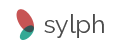
<style>
.page{position:relative;width:125px;height:50px;background:#ffffff}
.page>*{position:absolute;margin:0}
.t1{font:25px "Raleway-Regular";color:#4a4a4a}
</style>
<div class="page">
<p class="t1" style="left:44px;top:14px;width:60px;height:24px">sylph</p>
</div>
